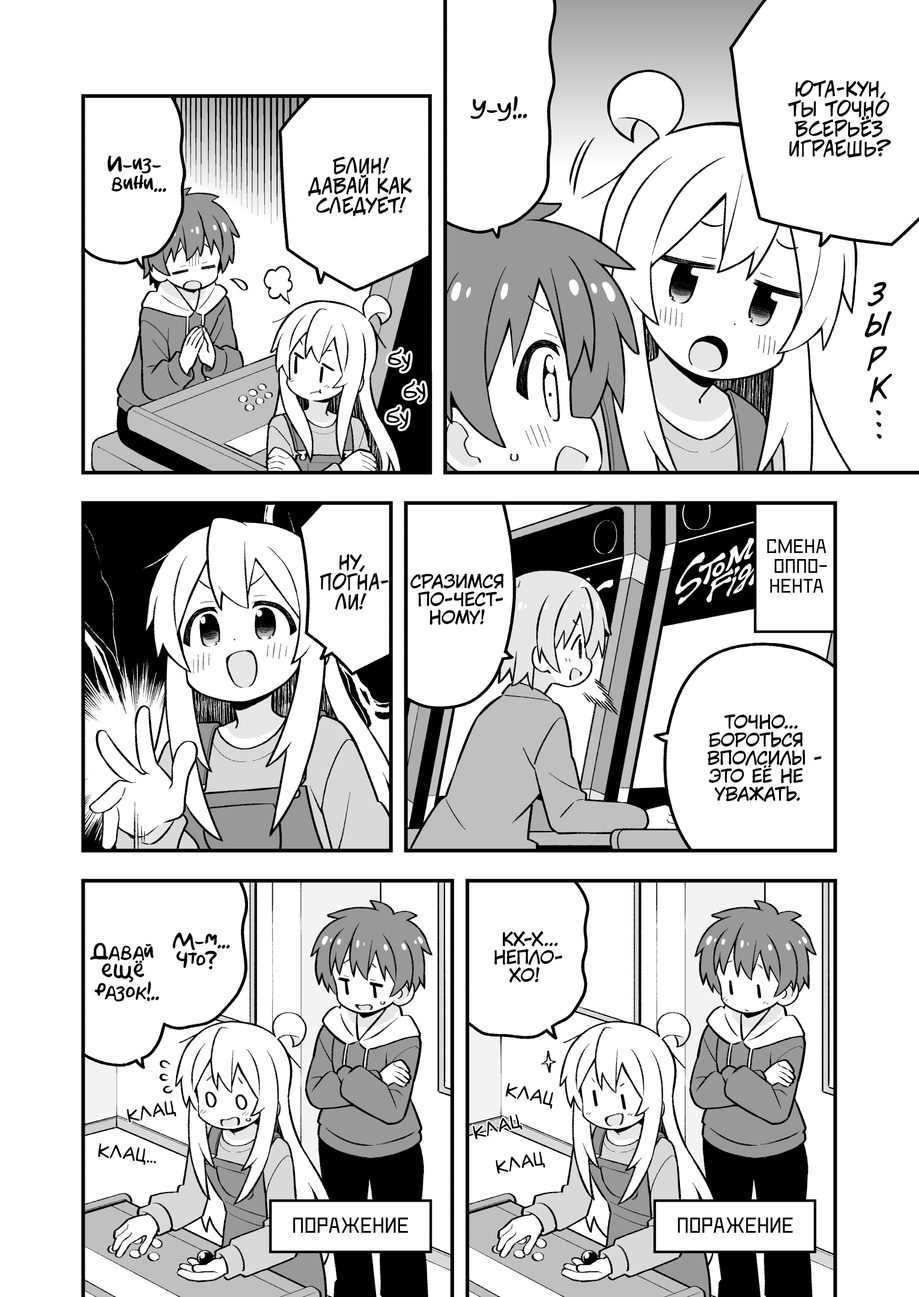
<style>
.page{position:relative;width:919px;height:1297px;background:#ffffff}
.page>*{position:absolute;margin:0}
.t1{font:19.8px "v_CCJeffCampbell";color:#000000;text-transform:uppercase}
.t2{font:23.4px "AkbarPlain";color:#000000}
.t3{font:19.8px "AkbarPlain";color:#000000}
.t4{font:28.8px "v_CCDearDiary";color:#000000;text-transform:uppercase}
.t5{font:25.2px "v_Augie";color:#000000}
.t6{font:28.8px "v_CCDearDiary";letter-spacing:0.2em;color:#000000;text-transform:uppercase}
.t7{font:19.8px "DeadMetroC";color:#000000;text-transform:uppercase}
.t8{font:18px "KuraiVoice2";color:#000000;text-transform:uppercase}
.t9{font:18px "v_Augie";color:#000000;text-transform:uppercase;font-weight:bold;scale:0.9 1}
.t10{font:21.6px "DeadMetroC";color:#000000;text-transform:uppercase}
</style>
<div class="page">
<p class="t1" style="left:788px;top:80px;width:103px;height:78px;text-align:center">Юта-кун,<br>ты точно<br>всерьёз<br>играешь?</p>
<p class="t2" style="left:470px;top:96px;width:57px;height:25px">У-у!..</p>
<p class="t3" style="left:108px;top:156px;width:58px;height:36px;text-align:center">И-из-<br>вини...</p>
<p class="t1" style="left:308px;top:157px;width:104px;height:59px;text-align:center">Блин!<br>Давай как<br>следует!</p>
<p class="t4" style="left:867px;top:282px;width:20px;height:25px">з</p>
<p class="t4" style="left:864px;top:311px;width:28px;height:27px;rotate:-3deg">ы</p>
<p class="t5" style="left:388px;top:349px;width:22px;height:23px;rotate:3deg">бу</p>
<p class="t4" style="left:867px;top:346px;width:20px;height:25px;rotate:-5deg">р</p>
<p class="t4" style="left:870px;top:374px;width:22px;height:29px;rotate:-7deg">к</p>
<p class="t5" style="left:404px;top:381px;width:22px;height:21px;rotate:-10deg">бу</p>
<p class="t5" style="left:386px;top:407px;width:22px;height:22px;rotate:2deg">бу</p>
<p class="t6" style="left:876px;top:410px;width:6px;height:29px;rotate:89deg">...</p>
<p class="t7" style="left:767px;top:539px;width:60px;height:54px;text-align:center">Смена<br>оппо-<br>нента</p>
<p class="t1" style="left:320px;top:554px;width:69px;height:57px;text-align:center">Ну,<br>погна-<br>ли!</p>
<p class="t8" style="left:410px;top:574px;width:94px;height:51px;text-align:center">Сразимся<br>по-чест-<br>ному!</p>
<p class="t8" style="left:708px;top:714px;width:114px;height:88px;text-align:center">Точно...<br>Бороться<br>вполсилы -<br>это её не<br>уважать.</p>
<p class="t3" style="left:172px;top:933px;width:58px;height:37px;text-align:center">М-м...<br>Что?</p>
<p class="t8" style="left:494px;top:932px;width:68px;height:51px;text-align:center">Кх-х...<br>Непло-<br>хо!</p>
<p class="t3" style="left:90px;top:943px;width:69px;height:59px;text-align:center">Давай<br>ещё<br>разок!..</p>
<p class="t9" style="left:505px;top:1083px;width:48px;height:26px;rotate:12deg">клац</p>
<p class="t9" style="left:127px;top:1101px;width:50px;height:22px;rotate:-11deg">клац</p>
<p class="t9" style="left:473px;top:1115px;width:50px;height:24px;rotate:-15deg">клац</p>
<p class="t9" style="left:98px;top:1144px;width:58px;height:21px;rotate:6deg">клац...</p>
<p class="t9" style="left:496px;top:1152px;width:49px;height:22px;rotate:-11deg">клац</p>
<p class="t10" style="left:293px;top:1218px;width:115px;height:15px">Поражение</p>
<p class="t10" style="left:678px;top:1218px;width:115px;height:15px">Поражение</p>
</div>
